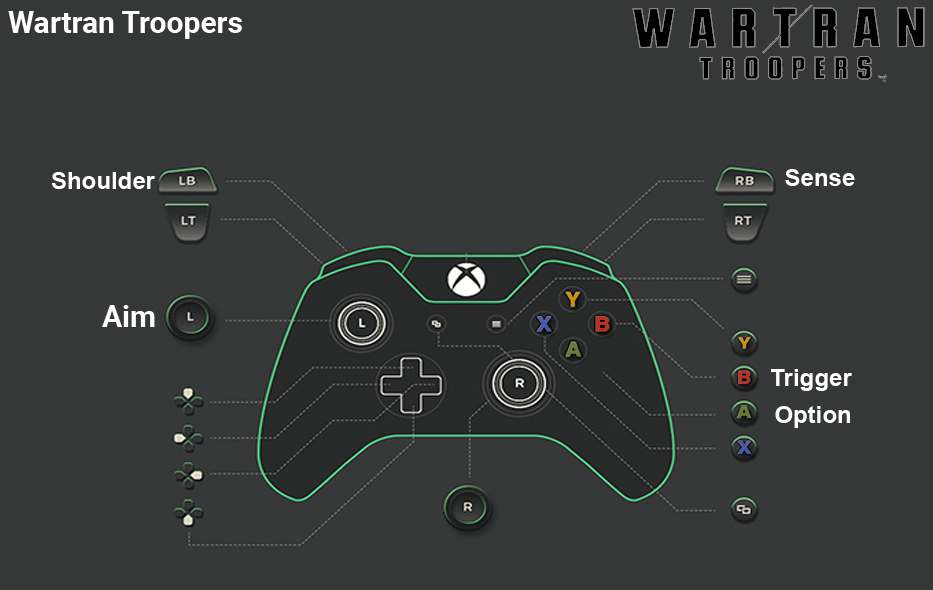
<style>
.page{position:relative;width:933px;height:590px;background:#363838}
.page>*{position:absolute;margin:0}
.t1{font:30px "Roboto-Bold";color:#ffffff}
.t2{font:24px "Arial-BoldMT";color:#fefefe}
.t3{font:30px "Roboto-Bold";color:#fefefe}
</style>
<div class="page">
<p class="t1" style="left:8px;top:11px;width:234px;height:28px">Wartran Troopers</p>
<p class="t2" style="left:51px;top:172px;width:104px;height:17px">Shoulder</p>
<p class="t2" style="left:785px;top:169px;width:70px;height:17px">Sense</p>
<p class="t3" style="left:102px;top:305px;width:53px;height:22px">Aim</p>
<p class="t2" style="left:771px;top:369px;width:81px;height:22px">Trigger</p>
<p class="t2" style="left:775px;top:406px;width:75px;height:22px">Option</p>
</div>
